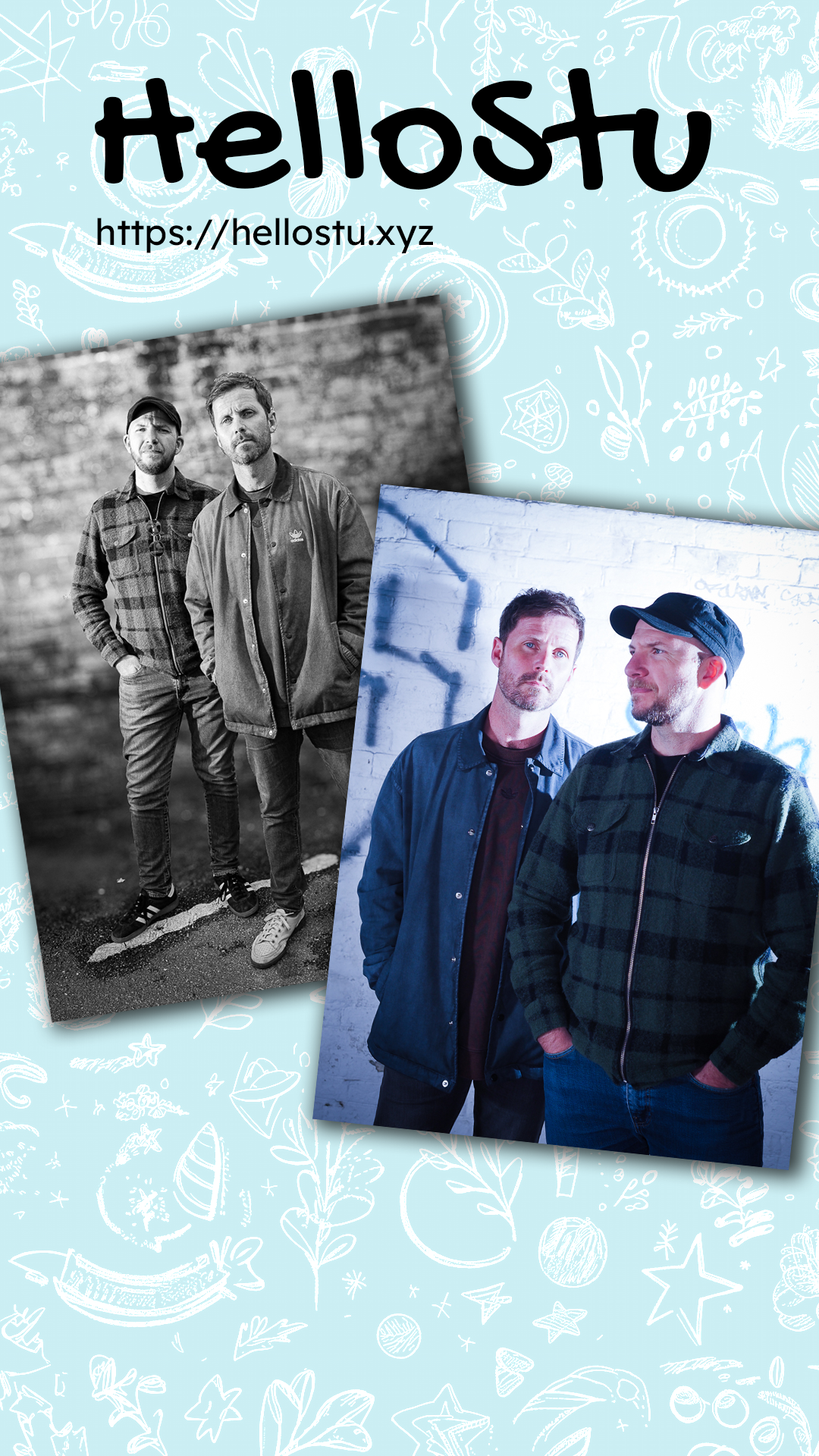
<style>
.page{position:relative;width:819px;height:1456px}
.page>*{position:absolute;margin:0}
.t1{font:185px "GochiHand-Regular";color:#000000}
.t2{font:36.4px "Lexend-Regular";color:#000000}
</style>
<div class="page">
<p class="t1" style="left:95px;top:67px;width:617px;height:126px">HelloStu</p>
<p class="t2" style="left:97px;top:218px;width:336px;height:35px">https://hellostu.xyz</p>
</div>
